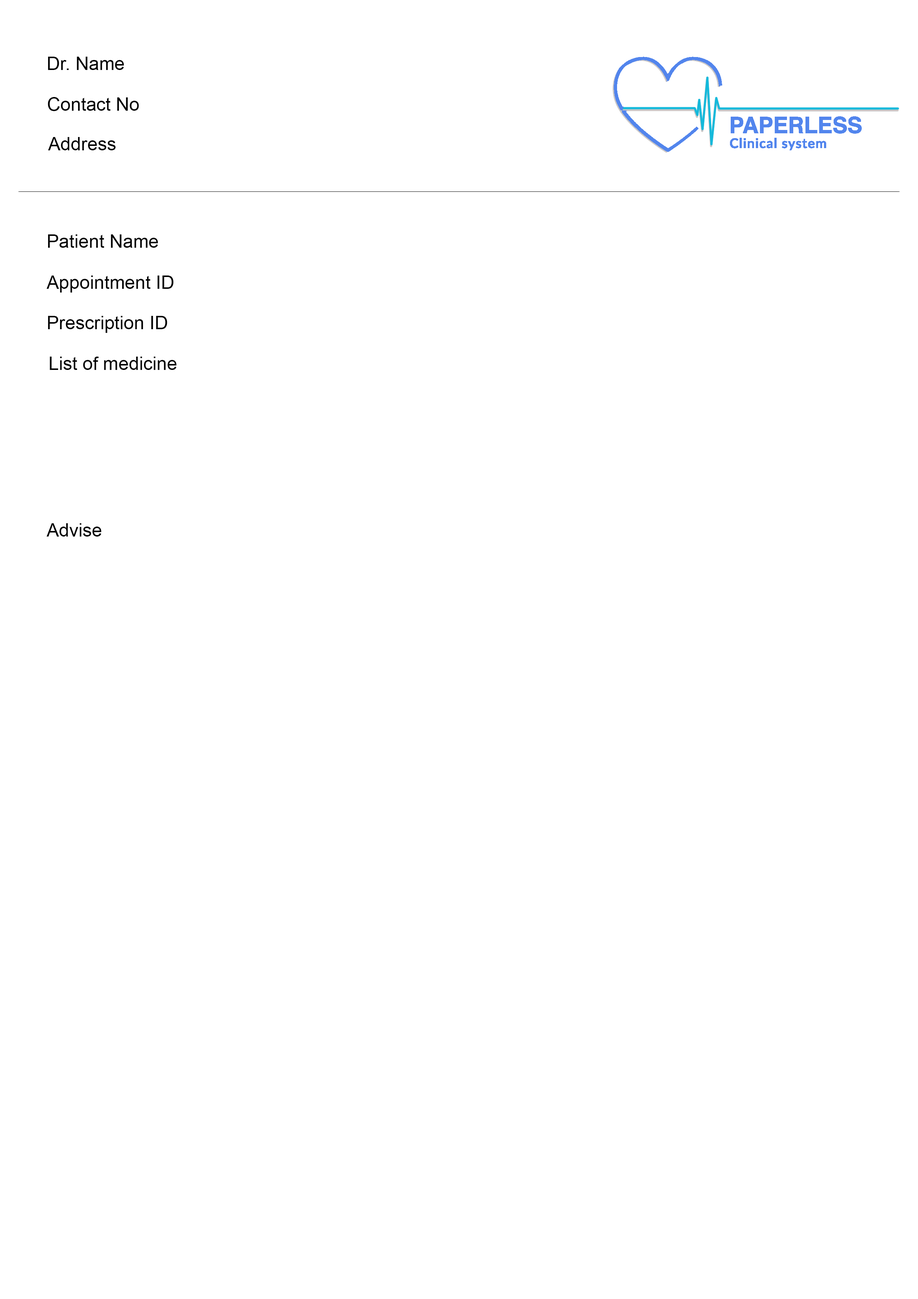
<style>
.page{position:relative;width:918px;height:1299px;background:#ffffff}
.page>*{position:absolute;margin:0}
.t1{font:18.5px "ArialMT";color:#000000}
.t2{font:18.4px "ArialMT";color:#000000}
</style>
<div class="page">
<p class="t1" style="left:48px;top:57px;width:76px;height:13px">Dr. Name</p>
<p class="t1" style="left:48px;top:97px;width:91px;height:14px">Contact No</p>
<p class="t2" style="left:48px;top:137px;width:68px;height:13px">Address</p>
<p class="t1" style="left:48px;top:234px;width:110px;height:14px">Patient Name</p>
<p class="t1" style="left:47px;top:275px;width:127px;height:17px">Appointment ID</p>
<p class="t1" style="left:48px;top:316px;width:119px;height:17px">Prescription ID</p>
<p class="t1" style="left:50px;top:357px;width:127px;height:13px">List of medicine</p>
<p class="t1" style="left:47px;top:523px;width:54px;height:13px">Advise</p>
</div>
